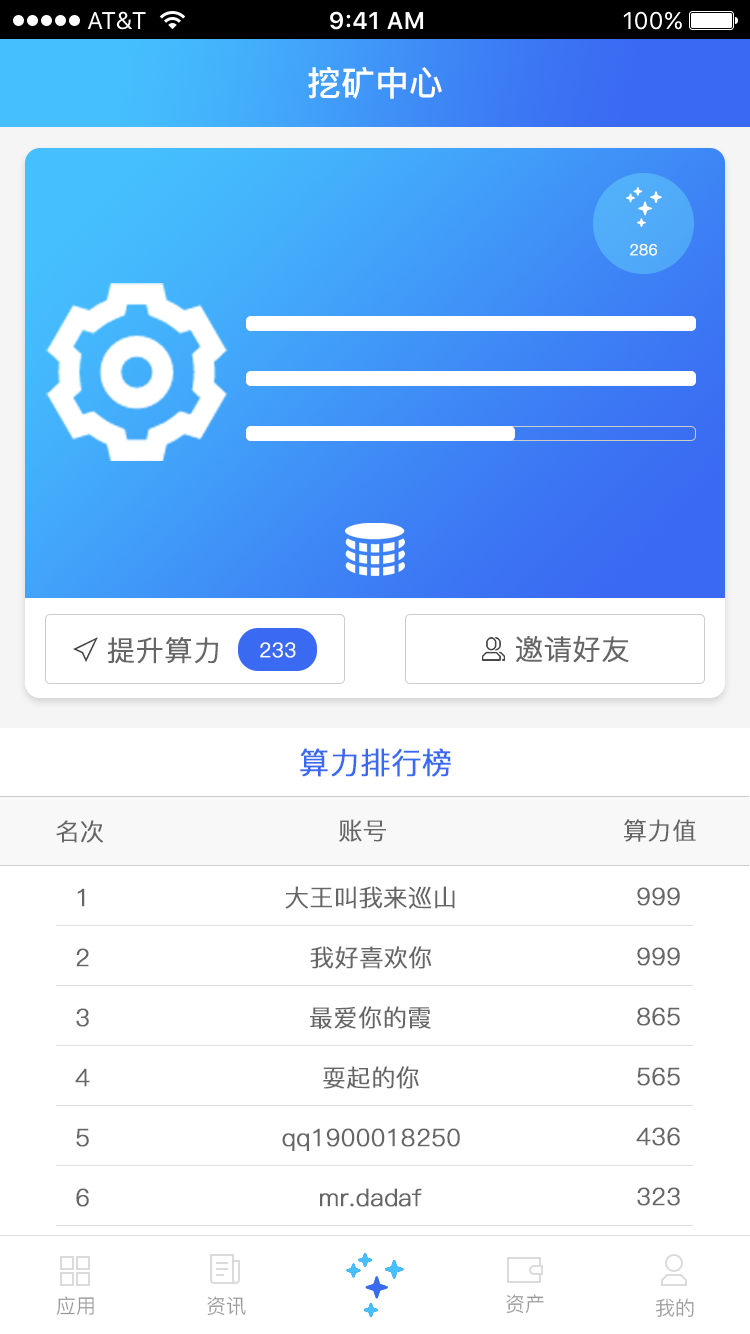
<style>
.page{position:relative;width:750px;height:1334px;background:#ffffff}
.page>*{position:absolute;margin:0}
.t1{font:34px "PingFang-SC-Bold";color:#ffffff}
.t2{font:15.2px "PingFang-SC-Regular";color:#ffffff;font-weight:bold}
.t3{font:28px "PingFang-SC-Regular";color:#666666;font-weight:bold}
.t4{font:20px "PingFang-SC-Regular";color:#fefefe;font-weight:bold}
.t5{font:30px "PingFang-SC-Regular";color:#3a6af2;font-weight:bold}
.t6{font:24px "PingFang-SC-Regular";color:#666666;font-weight:bold}
.t7{font:20px "PingFang-SC-Regular";color:#999999}
</style>
<div class="page">
<p class="t1" style="left:308px;top:67px;width:134px;height:32px">挖矿中心</p>
<p class="t2" style="left:630px;top:243px;width:28px;height:13px">286</p>
<p class="t3" style="left:107px;top:637px;width:111px;height:27px">提升算力</p>
<p class="t3" style="left:516px;top:635px;width:113px;height:28px">邀请好友</p>
<p class="t4" style="left:260px;top:642px;width:36px;height:16px">233</p>
<p class="t5" style="left:300px;top:748px;width:151px;height:29px">算力排行榜</p>
<p class="t6" style="left:56px;top:820px;width:47px;height:23px">名次</p>
<p class="t6" style="left:339px;top:819px;width:47px;height:23px">账号</p>
<p class="t6" style="left:624px;top:819px;width:72px;height:23px">算力值</p>
<p class="t6" style="left:77px;top:888px;width:8px;height:19px">1</p>
<p class="t6" style="left:285px;top:886px;width:170px;height:23px">大王叫我来巡山</p>
<p class="t6" style="left:637px;top:887px;width:43px;height:19px">999</p>
<p class="t6" style="left:76px;top:948px;width:13px;height:19px">2</p>
<p class="t6" style="left:310px;top:946px;width:122px;height:23px">我好喜欢你</p>
<p class="t6" style="left:637px;top:947px;width:43px;height:19px">999</p>
<p class="t6" style="left:76px;top:1008px;width:13px;height:19px">3</p>
<p class="t6" style="left:310px;top:1006px;width:121px;height:23px">最爱你的霞</p>
<p class="t6" style="left:637px;top:1007px;width:43px;height:19px">865</p>
<p class="t6" style="left:75px;top:1068px;width:15px;height:19px">4</p>
<p class="t6" style="left:323px;top:1066px;width:96px;height:23px">耍起的你</p>
<p class="t6" style="left:637px;top:1067px;width:43px;height:19px">565</p>
<p class="t6" style="left:76px;top:1128px;width:13px;height:19px">5</p>
<p class="t6" style="left:282px;top:1128px;width:178px;height:23px">qq1900018250</p>
<p class="t6" style="left:636px;top:1127px;width:44px;height:19px">436</p>
<p class="t6" style="left:76px;top:1188px;width:13px;height:19px">6</p>
<p class="t6" style="left:320px;top:1188px;width:102px;height:19px">mr.dadaf</p>
<p class="t6" style="left:637px;top:1187px;width:43px;height:19px">323</p>
<p class="t7" style="left:57px;top:1296px;width:37px;height:19px">应用</p>
<p class="t7" style="left:207px;top:1296px;width:39px;height:20px">资讯</p>
<p class="t7" style="left:506px;top:1294px;width:38px;height:19px">资产</p>
<p class="t7" style="left:655px;top:1298px;width:39px;height:19px">我的</p>
</div>
